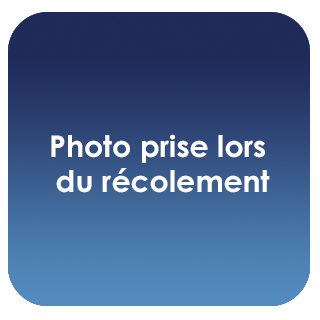
<style>
.page{position:relative;width:320px;height:320px}
.page>*{position:absolute;margin:0}
.t1{font:30px/35px "CenturyGothic-Bold";color:#ffffff}
</style>
<div class="page">
<p class="t1" style="left:51px;top:134px;width:219px;height:59px;text-align:center">Photo prise lors <br>du récolement</p>
</div>
